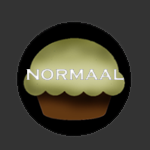
<style>
.page{position:relative;width:150px;height:150px;background:#333333}
.page>*{position:absolute;margin:0}
.t1{font:20px "CopperplateGothic-Bold";color:#e0e0e0}
</style>
<div class="page">
<p class="t1" style="left:26px;top:68px;width:98px;height:13px">normaal</p>
</div>
